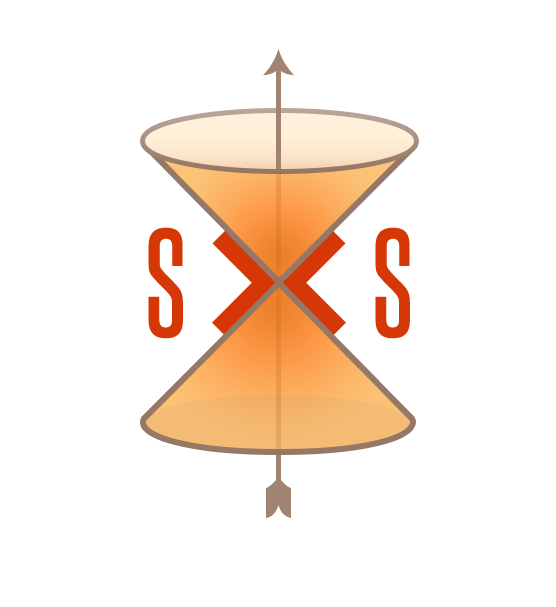
<style>
.page{position:relative;width:556px;height:607px;background:#ffffff}
.page>*{position:absolute;margin:0}
.t1{font:130px "SteelfishRg-Regular";letter-spacing:0.23em;color:#d53706;font-weight:bold}
</style>
<div class="page">
<p class="t1" style="left:148px;top:227px;width:262px;height:112px">S   S</p>
</div>
